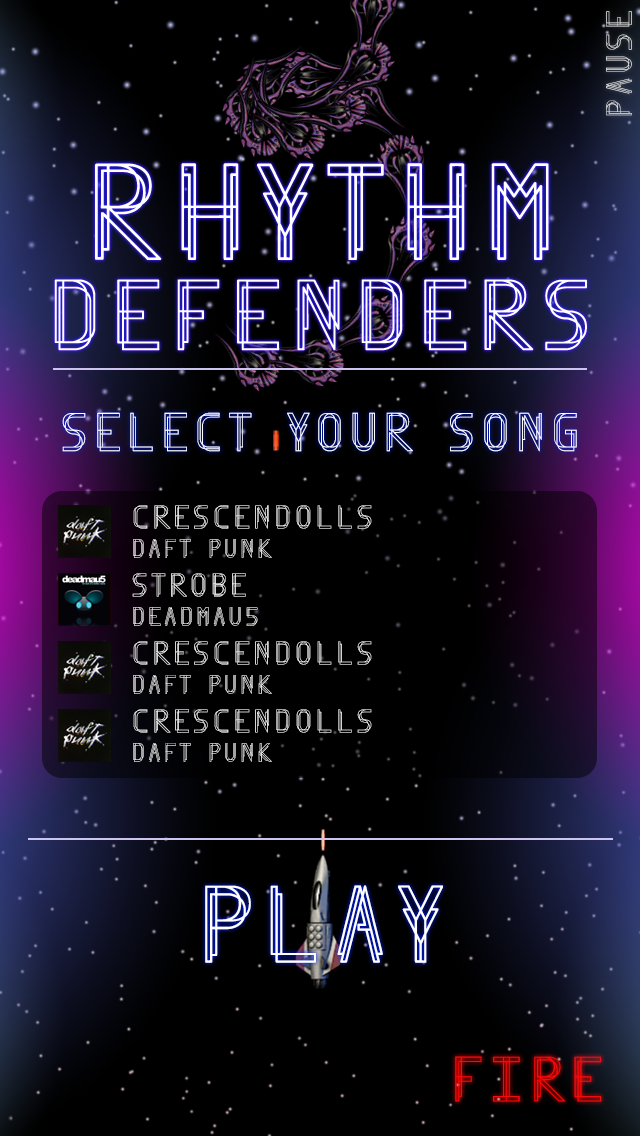
<style>
.page{position:relative;width:640px;height:1136px;background:#000000}
.page>*{position:absolute;margin:0}
.t1{font:40px "Finity";color:#dfdfe1}
.t2{font:60px "Finity";color:#ffffff}
.t3{font:36px "Finity";color:#ffffff}
.t4{font:29px "Finity";color:#ffffff}
.t5{font:120px "Finity";color:#ffffff}
.t6{font:70px "Finity";color:#f40b0b}
</style>
<div class="page">
<p class="t1" style="left:606px;top:11px;width:26px;height:105px;rotate:-90deg">PAUSE</p>
<p class="t2" style="left:62px;top:412px;width:515px;height:40px">SELECT YOUR SONG</p>
<p class="t3" style="left:133px;top:505px;width:239px;height:24px">CRESCENDOLLS</p>
<p class="t4" style="left:133px;top:539px;width:139px;height:19px">DAFT PUNK</p>
<p class="t3" style="left:132px;top:573px;width:114px;height:24px">STROBE</p>
<p class="t4" style="left:133px;top:607px;width:125px;height:19px">DEADMAU5</p>
<p class="t3" style="left:133px;top:641px;width:239px;height:24px">CRESCENDOLLS</p>
<p class="t4" style="left:133px;top:675px;width:139px;height:19px">DAFT PUNK</p>
<p class="t3" style="left:133px;top:709px;width:239px;height:24px">CRESCENDOLLS</p>
<p class="t4" style="left:133px;top:743px;width:139px;height:19px">DAFT PUNK</p>
<p class="t5" style="left:205px;top:885px;width:238px;height:78px">PLAY</p>
<p class="t6" style="left:455px;top:1056px;width:147px;height:46px">FIRE</p>
</div>
